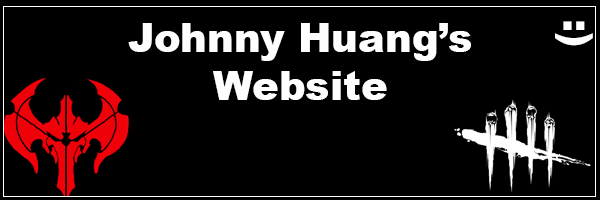
<style>
.page{position:relative;width:600px;height:200px;background:#000000}
.page>*{position:absolute;margin:0}
.t1{font:40px "Arial-Black";color:#fefeff}
</style>
<div class="page">
<p class="t1" style="left:128px;top:23px;width:343px;height:77px;text-align:center">Johnny Huang’s Website</p>
<p class="t1" style="left:555px;top:21px;width:38px;height:25px;rotate:90deg">:)</p>
</div>
